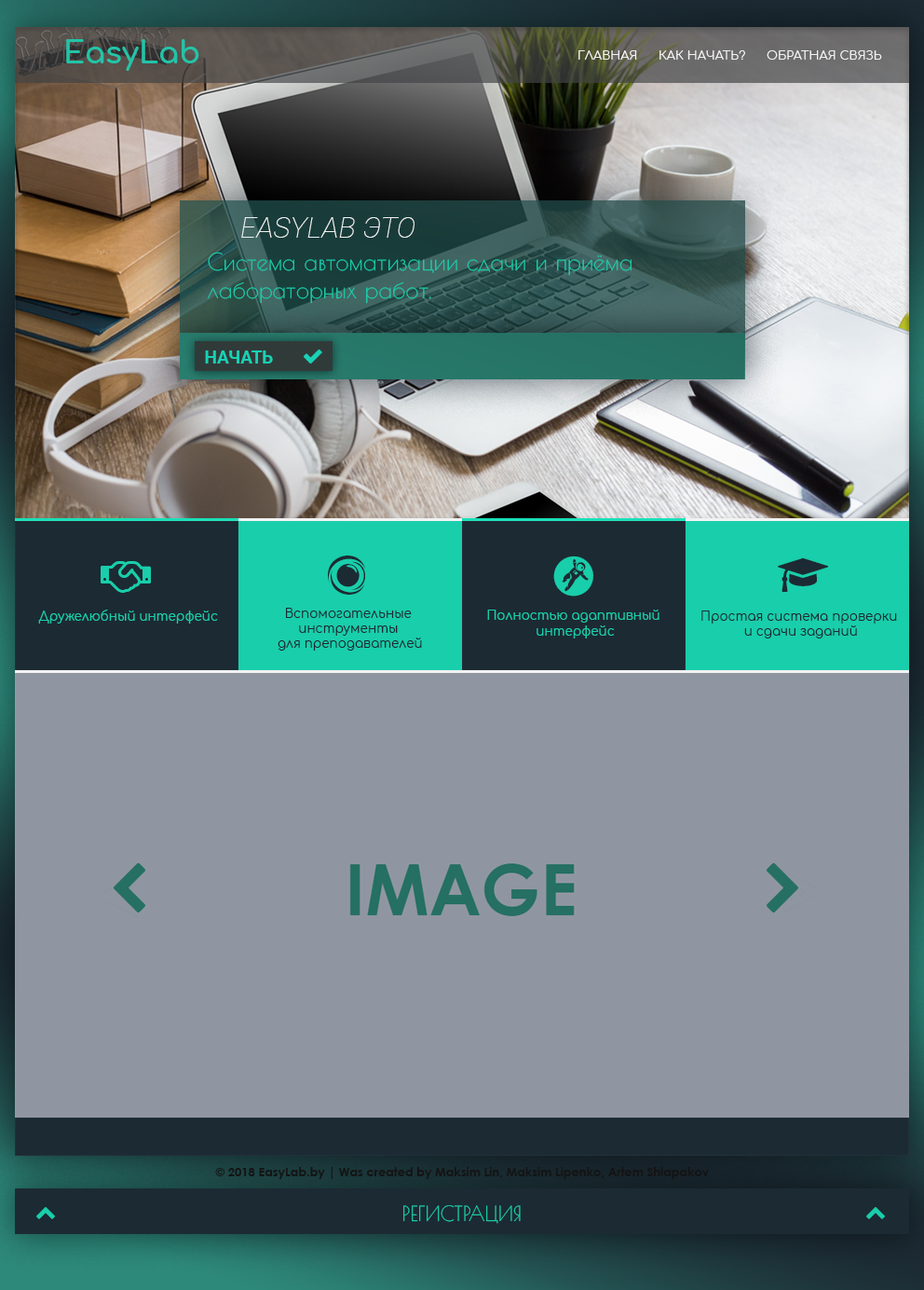
<style>
.page{position:relative;width:924px;height:1290px;background:#8f96a1}
.page>*{position:absolute;margin:0}
.t1{font:30.8px "Comfortaa-Bold";color:#22c4a8}
.t2{font:12.1px "Comfortaa-Regular";color:#f2f2f2}
.t3{font:28.9px "Roboto-ThinItalic";color:#f2f2f2}
.t4{font:23.3px "PoiretOne-Regular";color:#19ceab}
.t5{font:17.3px "Roboto-Bold";color:#19d1b5}
.t6{font:12.6px "Comfortaa-Regular";color:#19ceab}
.t7{font:12.6px "Comfortaa-Regular";color:#1c2a33}
.t8{font:12.1px "CenturyGothic-Bold";color:#161616}
.t9{font:20.5px "PoiretOne-Regular";color:#19ceab}
</style>
<div class="page">
<p class="t1" style="left:66px;top:39px;width:133px;height:32px">EasyLab</p>
<p class="t2" style="left:579px;top:50px;width:58px;height:10px">ГЛАВНАЯ</p>
<p class="t2" style="left:660px;top:50px;width:86px;height:10px">КАК НАЧАТЬ?</p>
<p class="t2" style="left:767px;top:50px;width:116px;height:10px">ОБРАТНАЯ СВЯЗЬ</p>
<p class="t3" style="left:241px;top:217px;width:174px;height:21px">EASYLAB ЭТО</p>
<p class="t4" style="left:208px;top:252px;width:424px;height:52px">Система автоматизации сдачи и приёма <br>лабораторных работ.</p>
<p class="t5" style="left:205px;top:350px;width:68px;height:13px">НАЧАТЬ</p>
<p class="t6" style="left:38px;top:609px;width:180px;height:14px">Дружелюбный интерфейс</p>
<p class="t7" style="left:278px;top:608px;width:144px;height:43px;text-align:center">Вспомогательные <br>инструменты <br>для преподавателей</p>
<p class="t6" style="left:487px;top:609px;width:173px;height:29px;text-align:center">Полностью адаптивный <br>интерфейс</p>
<p class="t7" style="left:702px;top:610px;width:195px;height:28px;text-align:center">Простая система проверки <br>и сдачи заданий</p>
<p class="t8" style="left:215px;top:1167px;width:494px;height:12px">© 2018 EasyLab.by | Was created by Maksim Lin, Maksim Lipenko, Artem Shlapakov</p>
<p class="t9" style="left:404px;top:1205px;width:117px;height:19px">РЕГИСТРАЦИЯ</p>
</div>
